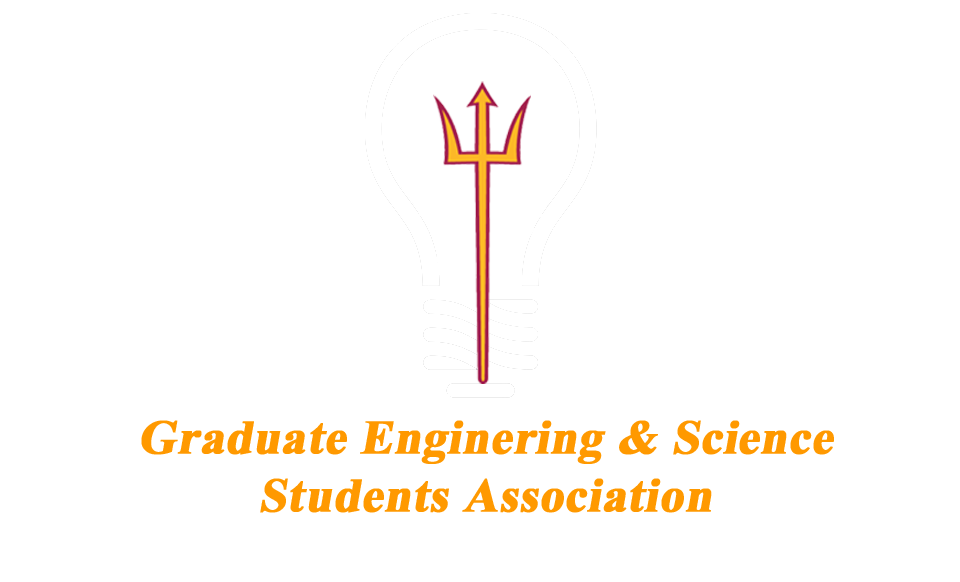
<style>
.page{position:relative;width:960px;height:582px;background:#ffffff}
.page>*{position:absolute;margin:0}
.t1{font:48px "TimesNewRomanPS-BoldMT";color:#ff9900;font-weight:bold;font-style:italic}
</style>
<div class="page">
<p class="t1" style="left:141px;top:420px;width:693px;height:93px;text-align:center">Graduate Enginering &amp; Science <br>Students Association</p>
</div>
